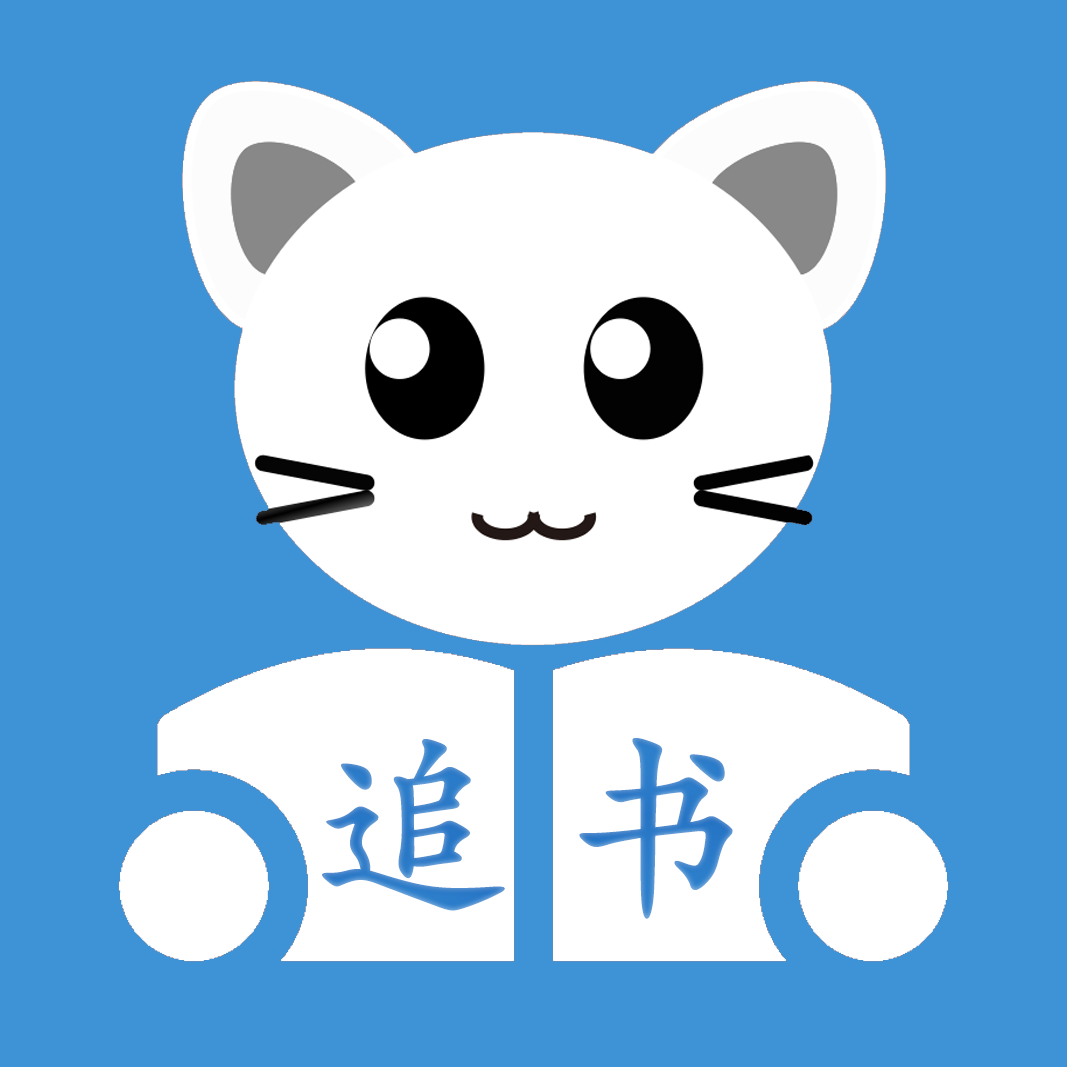
<style>
.page{position:relative;width:1067px;height:1067px;background:#3d93d6}
.page>*{position:absolute;margin:0}
.t1{font:200px "STKaitiSC-Bold";color:#3c93d6}
</style>
<div class="page">
<p class="t1" style="left:322px;top:738px;width:411px;height:181px">追 书</p>
</div>
